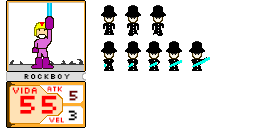
<style>
.page{position:relative;width:256px;height:128px;background:#ffffff}
.page>*{position:absolute;margin:0}
.t1{font:8px "Silkscreen-Expanded";color:#000000}
.t2{font:10px "Silkscreen";color:#ff0000}
.t3{font:8px "Silkscreen";color:#ff0000}
.t4{font:30px "Silkscreen";color:#ff0000}
.t5{font:16px "Silkscreen";color:#690000}
.t6{font:16px "Silkscreen";color:#000000}
</style>
<div class="page">
<p class="t1" style="left:24px;top:74px;width:46px;height:5px">ROCKBOY</p>
<p class="t2" style="left:12px;top:87px;width:25px;height:7px">VIDA</p>
<p class="t3" style="left:47px;top:86px;width:15px;height:6px">atk</p>
<p class="t4" style="left:20px;top:95px;width:37px;height:19px">55</p>
<p class="t5" style="left:69px;top:90px;width:9px;height:11px">5</p>
<p class="t6" style="left:68px;top:110px;width:9px;height:11px">3</p>
<p class="t3" style="left:49px;top:117px;width:15px;height:6px">VEL</p>
</div>
